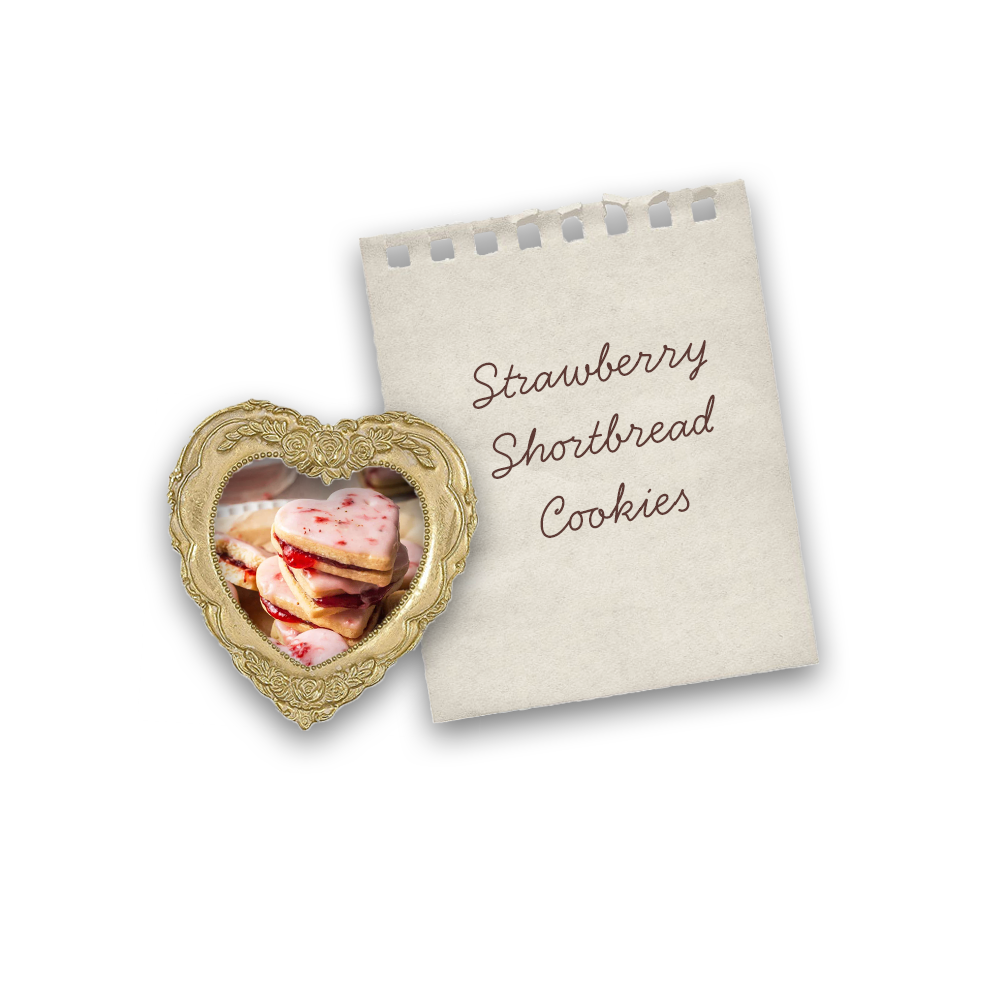
<style>
.page{position:relative;width:1000px;height:1000px;background:#ffffff}
.page>*{position:absolute;margin:0}
.t1{font:60px "HandsomePro";color:#5e3b35}
</style>
<div class="page">
<p class="t1" style="left:472px;top:340px;width:243px;height:198px;rotate:-10deg">Strawberry Shortbread Cookies</p>
</div>
